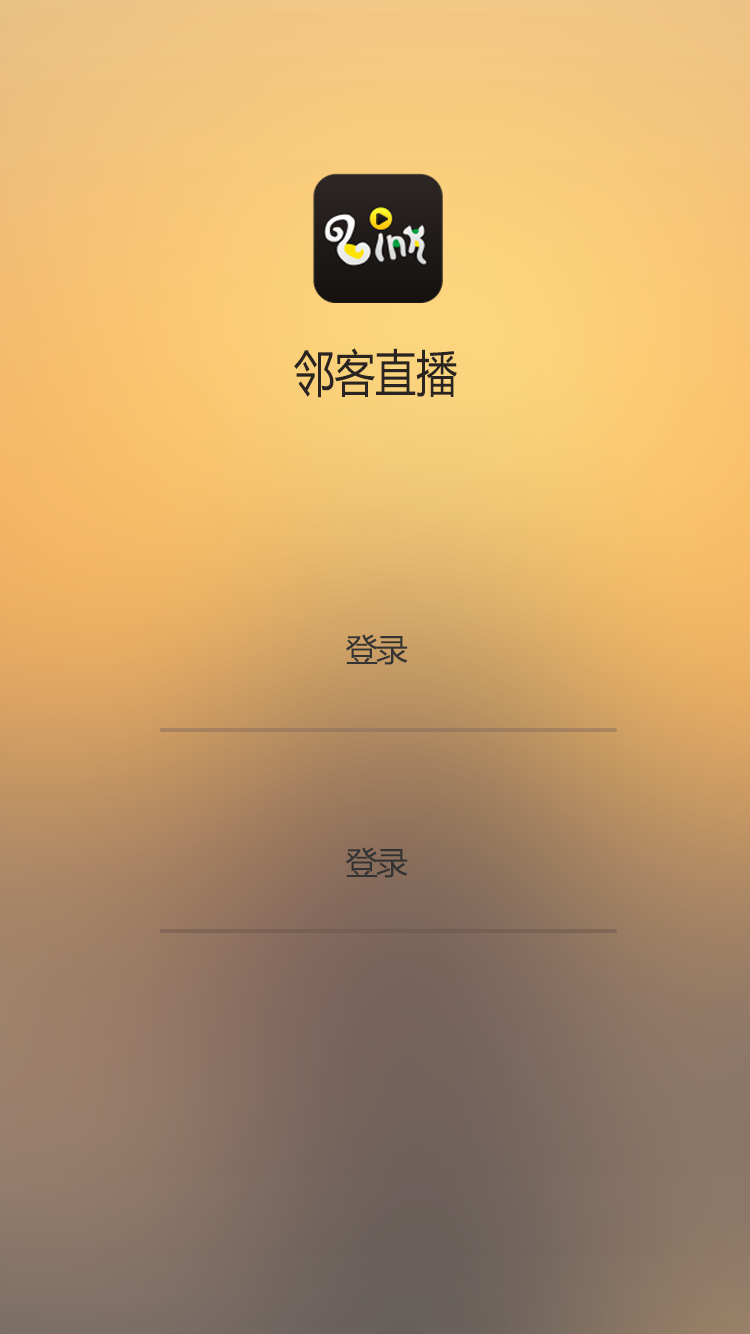
<style>
.page{position:relative;width:750px;height:1334px}
.page>*{position:absolute;margin:0}
.t1{font:50px "MicrosoftYaHei";color:#292321;scale:0.82 1}
.t2{font:32px "MicrosoftYaHei";letter-spacing:-0.06em;color:#333333}
</style>
<div class="page">
<p class="t1" style="left:294px;top:348px;width:163px;height:50px">邻客直播</p>
<p class="t2" style="left:346px;top:634px;width:62px;height:31px">登录</p>
<p class="t2" style="left:346px;top:847px;width:62px;height:31px">登录</p>
</div>
